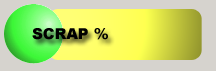
<style>
.page{position:relative;width:216px;height:71px;background:#d6d3ce}
.page>*{position:absolute;margin:0}
.t1{font:15px "Arial-Black";color:#000000}
</style>
<div class="page">
<p class="t1" style="left:32px;top:28px;width:76px;height:12px">SCRAP %</p>
</div>
